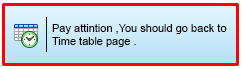
<style>
.page{position:relative;width:242px;height:69px}
.page>*{position:absolute;margin:0}
.t1{font:11px "ArialMT";color:#020202}
</style>
<div class="page">
<p class="t1" style="left:52px;top:24px;width:175px;height:23px">Pay attintion ,You should go back to <br>Time table page .</p>
</div>
